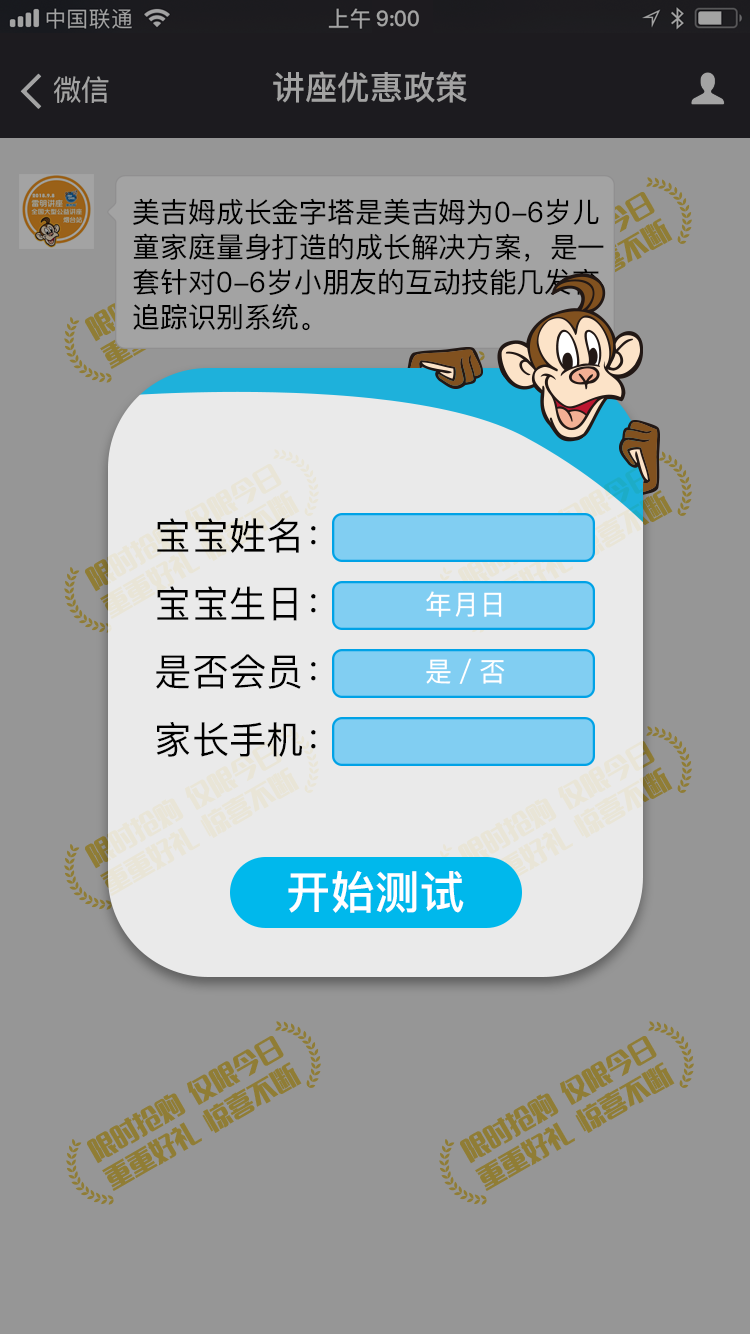
<style>
.page{position:relative;width:750px;height:1334px;background:#969696}
.page>*{position:absolute;margin:0}
.t1{font:21.3px "PingFangSC-Medium";color:#a3a3a3}
.t2{font:28.8px "PingFangSC-Regular";color:#a3a3a3}
.t3{font:32.9px "PingFangSC-Medium";color:#a3a3a3}
.t4{font:28.1px/40.8px "PingFangSC-Regular";color:#000000}
.t5{font:37.7px/75.5px "PingFangSC-Regular";color:#000000}
.t6{font:27.2px "PingFangSC-Regular";color:#ffffff}
.t7{font:45px "PingFangSC-Medium";color:#ffffff}
</style>
<div class="page">
<p class="t1" style="left:376px;top:10px;width:43px;height:17px">9:00</p>
<p class="t2" style="left:54px;top:76px;width:55px;height:27px">微信</p>
<p class="t3" style="left:273px;top:71px;width:194px;height:32px">讲座优惠政策</p>
<p class="t4" style="left:133px;top:198px;width:471px;height:133px">美吉姆成长金字塔是美吉姆为0-6岁儿<br>童家庭量身打造的成长解决方案，是一<br>套针对0-6岁小朋友的互动技能几发育<br>追踪识别系统。</p>
<p class="t5" style="left:156px;top:518px;width:160px;height:239px">宝宝姓名：<br>宝宝生日：<br>是否会员：<br>家长手机：</p>
<p class="t6" style="left:426px;top:591px;width:76px;height:26px">年月日</p>
<p class="t6" style="left:426px;top:658px;width:79px;height:26px">是／否</p>
<p class="t7" style="left:288px;top:870px;width:176px;height:43px">开始测试</p>
</div>
